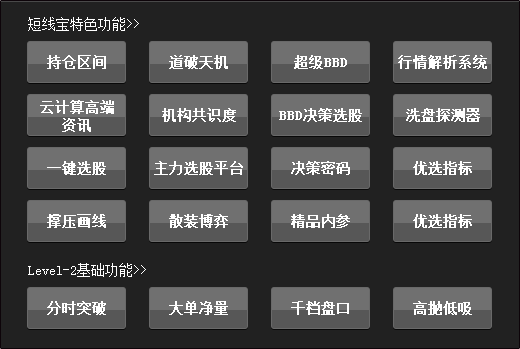
<style>
.page{position:relative;width:520px;height:349px;background:#212121}
.page>*{position:absolute;margin:0}
.t1{font:14px "SimSun";color:#ffffff}
.t2{font:14px "SimSun";color:#ffffff;font-weight:bold}
.t3{font:14px/18px "SimSun";color:#ffffff;font-weight:bold}
</style>
<div class="page">
<p class="t1" style="left:28px;top:17px;width:111px;height:14px">短线宝特色功能&gt;&gt;</p>
<p class="t2" style="left:47px;top:55px;width:59px;height:14px">持仓区间</p>
<p class="t2" style="left:169px;top:55px;width:59px;height:14px">道破天机</p>
<p class="t2" style="left:294px;top:55px;width:53px;height:14px">超级BBD</p>
<p class="t2" style="left:398px;top:55px;width:89px;height:14px">行情解析系统</p>
<p class="t3" style="left:40px;top:100px;width:74px;height:32px;text-align:center">云计算高端<br>资讯</p>
<p class="t2" style="left:162px;top:108px;width:74px;height:14px">机构共识度</p>
<p class="t2" style="left:279px;top:108px;width:83px;height:14px">BBD决策选股</p>
<p class="t2" style="left:406px;top:108px;width:74px;height:14px">洗盘探测器</p>
<p class="t2" style="left:47px;top:161px;width:59px;height:14px">一键选股</p>
<p class="t2" style="left:154px;top:161px;width:89px;height:14px">主力选股平台</p>
<p class="t2" style="left:291px;top:161px;width:59px;height:14px">决策密码</p>
<p class="t2" style="left:413px;top:161px;width:59px;height:14px">优选指标</p>
<p class="t2" style="left:47px;top:214px;width:59px;height:14px">撑压画线</p>
<p class="t2" style="left:169px;top:214px;width:59px;height:14px">散装博弈</p>
<p class="t2" style="left:291px;top:214px;width:59px;height:14px">精品内参</p>
<p class="t2" style="left:413px;top:214px;width:59px;height:14px">优选指标</p>
<p class="t1" style="left:28px;top:263px;width:118px;height:14px">Level-2基础功能&gt;&gt;</p>
<p class="t2" style="left:47px;top:301px;width:59px;height:14px">分时突破</p>
<p class="t2" style="left:169px;top:301px;width:59px;height:14px">大单净量</p>
<p class="t2" style="left:291px;top:301px;width:58px;height:14px">千档盘口</p>
<p class="t2" style="left:413px;top:301px;width:59px;height:14px">高抛低吸</p>
</div>
